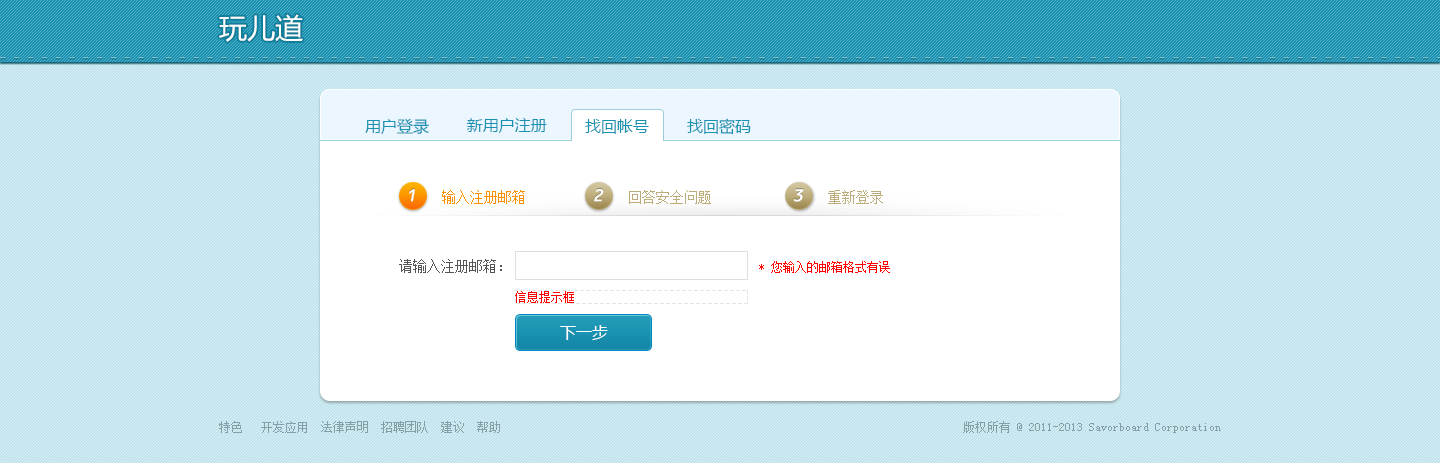
<style>
.page{position:relative;width:1440px;height:463px;background:#bfe4ed}
.page>*{position:absolute;margin:0}
.t1{font:28px "MicrosoftYaHei";color:#ffffff}
.t2{font:16px "MicrosoftYaHei";color:#1992b1}
.t3{font:19px "OCRB10PitchBT-Regular";color:#ffffff;font-style:italic}
.t4{font:14px "SimSun";color:#fc9200}
.t5{font:14px "SimSun";color:#bcac79}
.t6{font:14px "SimSun";color:#555555}
.t7{font:12px "SimSun";color:#ff0101}
.t8{font:16px "MicrosoftYaHei";color:#ffffff}
.t9{font:12px "SimSun";color:#849fa6}
</style>
<div class="page">
<p class="t1" style="left:219px;top:14px;width:84px;height:28px">玩儿道</p>
<p class="t2" style="left:365px;top:118px;width:64px;height:16px">用户登录</p>
<p class="t2" style="left:466px;top:118px;width:81px;height:15px">新用户注册</p>
<p class="t2" style="left:585px;top:119px;width:64px;height:15px">找回帐号</p>
<p class="t2" style="left:687px;top:118px;width:64px;height:17px">找回密码</p>
<p class="t3" style="left:409px;top:189px;width:6px;height:13px">1</p>
<p class="t4" style="left:442px;top:190px;width:83px;height:14px">输入注册邮箱</p>
<p class="t3" style="left:594px;top:189px;width:10px;height:13px">2</p>
<p class="t5" style="left:629px;top:190px;width:82px;height:14px">回答安全问题</p>
<p class="t3" style="left:794px;top:189px;width:10px;height:13px">3</p>
<p class="t5" style="left:828px;top:190px;width:55px;height:14px">重新登录</p>
<p class="t6" style="left:399px;top:259px;width:103px;height:14px">请输入注册邮箱：</p>
<p class="t7" style="left:759px;top:261px;width:131px;height:12px">* 您输入的邮箱格式有误</p>
<p class="t7" style="left:515px;top:291px;width:59px;height:12px">信息提示框</p>
<p class="t8" style="left:560px;top:325px;width:48px;height:15px">下一步</p>
<p class="t9" style="left:219px;top:421px;width:281px;height:12px">特色   开发应用  法律声明  招聘团队  建议  帮助</p>
<p class="t9" style="left:963px;top:421px;width:258px;height:12px">版权所有 @ 2011-2013 Savorboard Corporation</p>
</div>
